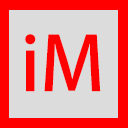
<style>
.page{position:relative;width:128px;height:128px;background:#dcdcdc}
.page>*{position:absolute;margin:0}
.t1{font:74px "AdobeHeitiStd-Regular";color:#ff0000}
</style>
<div class="page">
<p class="t1" style="left:25px;top:34px;width:76px;height:58px">iM</p>
</div>
